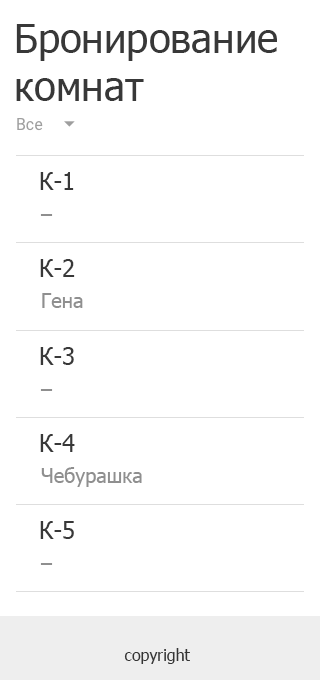
<style>
.page{position:relative;width:320px;height:680px;background:#ffffff}
.page>*{position:absolute;margin:0}
.t1{font:40px "Tahoma";color:#383838}
.t2{font:24px "Tahoma";color:#383838}
.t3{font:20px "Tahoma";color:#8f8f8f}
.t4{font:16px "Tahoma";color:#343434}
</style>
<div class="page">
<p class="t1" style="left:16px;top:24px;width:261px;height:77px">Бронирование комнат</p>
<p class="t2" style="left:40px;top:172px;width:34px;height:18px">К-1</p>
<p class="t3" style="left:40px;top:214px;width:13px;height:2px">–</p>
<p class="t2" style="left:40px;top:259px;width:35px;height:18px">К-2</p>
<p class="t3" style="left:42px;top:293px;width:41px;height:15px">Гена</p>
<p class="t2" style="left:40px;top:347px;width:34px;height:18px">К-3</p>
<p class="t3" style="left:40px;top:389px;width:13px;height:2px">–</p>
<p class="t2" style="left:40px;top:434px;width:35px;height:18px">К-4</p>
<p class="t3" style="left:41px;top:467px;width:101px;height:20px">Чебурашка</p>
<p class="t2" style="left:40px;top:521px;width:34px;height:18px">К-5</p>
<p class="t3" style="left:40px;top:563px;width:13px;height:2px">–</p>
<p class="t4" style="left:124px;top:648px;width:66px;height:16px">copyright</p>
</div>
